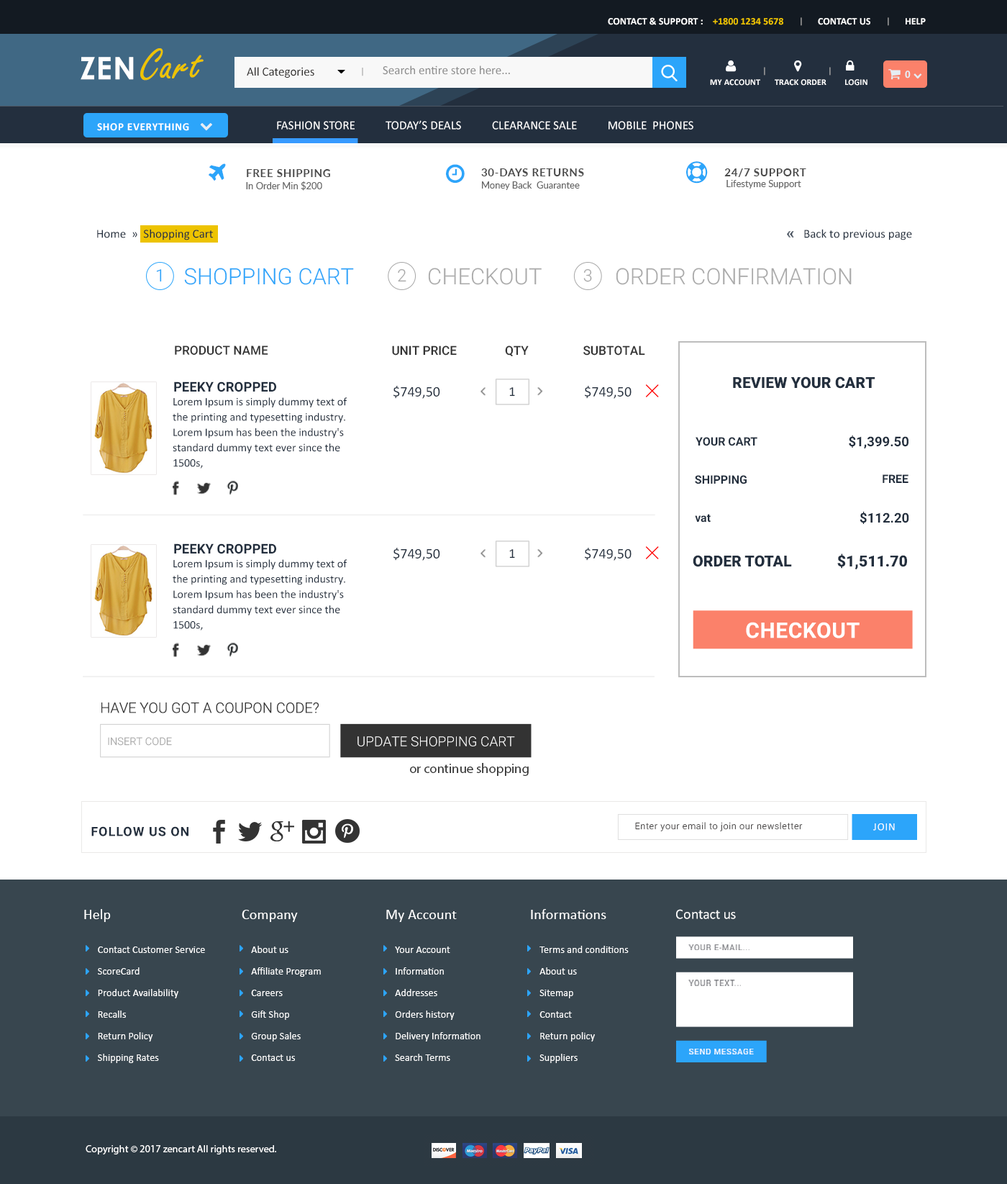
<style>
.page{position:relative;width:1007px;height:1184px;background:#ffffff}
.page>*{position:absolute;margin:0}
.t1{font:10.1px "Calibri-Bold";color:#ffffff;text-transform:uppercase}
.t2{font:10.1px "Calibri-Bold";color:#edc300;text-transform:uppercase}
.t3{font:8.6px "Calibri-Bold";text-transform:uppercase}
.t4{font:46.1px "FreestyleScript-Regular";color:#edc300;font-weight:bold}
.t5{font:31.1px "CenturyGothic-Bold";letter-spacing:0.02em;color:#ffffff;text-transform:uppercase}
.t6{font:12.2px "Calibri";color:#8e8e8e}
.t7{font:12.2px "Calibri";color:#32302f}
.t8{font:9.4px "Calibri"}
.t9{font:10.8px "Calibri-Bold";color:#e5edf4;text-transform:uppercase}
.t10{font:8.6px "Calibri-Bold";letter-spacing:0.01em;color:#ffffff;text-transform:uppercase}
.t11{font:10.8px "Calibri-Bold";letter-spacing:0.05em;color:#ffffff;text-transform:uppercase}
.t12{font:12.2px "Calibri";color:#ffffff}
.t13{font:10.8px "Lato-Bold";letter-spacing:0.05em;color:#4b4b4b}
.t14{font:9.4px "Lato-Regular";color:#666666}
.t15{font:12.2px "Calibri";color:#232f3e}
.t16{font:16.8px "Roboto-Light";color:#2ca5fa}
.t17{font:22.5px "Roboto-Light";color:#2ca5fa;text-transform:uppercase}
.t18{font:16.8px "Roboto-Light";color:#aaaaaa}
.t19{font:22.5px "Roboto-Light";color:#aaaaaa;text-transform:uppercase}
.t20{font:12.4px "Roboto-Medium";color:#333333}
.t21{font:15.3px "Roboto-Black";color:#232f3e}
.t22{font:13.4px "Roboto-Bold";color:#232f3e;text-transform:uppercase}
.t23{font:14.4px "Calibri";color:#232f3e}
.t24{font:13.4px "Calibri";color:#232f3e;text-transform:uppercase}
.t25{font:11.5px/15.3px "Calibri";color:#232f3e}
.t26{font:11.5px "Roboto-Bold";color:#232f3e}
.t27{font:13.4px "Roboto-Bold";color:#232f3e}
.t28{font:21.6px "Roboto-Bold";letter-spacing:0.02em;color:#ffffff;text-transform:uppercase}
.t29{font:14.4px "Roboto-Light";color:#333333}
.t30{font:10.5px "Roboto-Light";color:#a8a8a8;text-transform:uppercase}
.t31{font:13.7px "Roboto-Light";color:#ffffff;text-transform:uppercase}
.t32{font:13.4px "MyriadPro-Regular";color:#333333}
.t33{font:9.1px "Roboto-Light";letter-spacing:0.05em;color:#3f3d3d}
.t34{font:12.8px "Roboto-Bold";letter-spacing:0.05em;color:#232f3e}
.t35{font:10.8px "Calibri";letter-spacing:0.05em;color:#ffffff}
.t36{font:10.1px/21.6px "Calibri";letter-spacing:0.01em;color:#ffffff}
.t37{font:14.4px "Calibri";letter-spacing:0.01em;color:#ffffff}
.t38{font:14.4px "Calibri";color:#ffffff}
.t39{font:7.9px "Roboto-Regular";letter-spacing:0.07em;color:#7e7f84;text-transform:uppercase}
.t40{font:7.9px "Roboto-Regular";letter-spacing:0.07em;color:#ffffff;text-transform:uppercase}
.t41{font:10.1px "MyriadPro-Regular";letter-spacing:0.01em;color:#ffffff}
</style>
<div class="page">
<p class="t1" style="left:608px;top:17px;width:95px;height:8px">Contact &amp; Support :</p>
<p class="t1" style="left:713px;top:18px;width:213px;height:7px"><span class="t2">+1800 1234 5678 </span>              Contact Us               Help</p>
<p class="t3" style="left:801px;top:17px;width:1px;height:9px">|</p>
<p class="t3" style="left:888px;top:17px;width:1px;height:9px">|</p>
<p class="t4" style="left:140px;top:48px;width:64px;height:33px">Cart</p>
<p class="t5" style="left:81px;top:57px;width:53px;height:23px">Zen</p>
<p class="t6" style="left:383px;top:65px;width:127px;height:10px">Search entire store here...</p>
<p class="t7" style="left:247px;top:67px;width:67px;height:11px">All Categories</p>
<p class="t8" style="left:362px;top:68px;width:1px;height:8px">|</p>
<p class="t3" style="left:764px;top:67px;width:2px;height:9px">|</p>
<p class="t3" style="left:830px;top:67px;width:1px;height:9px">|</p>
<p class="t9" style="left:905px;top:71px;width:6px;height:7px">0</p>
<p class="t10" style="left:710px;top:79px;width:158px;height:7px">my account       Track Order         Login</p>
<p class="t11" style="left:97px;top:123px;width:92px;height:8px">Shop Everything</p>
<p class="t12" style="left:277px;top:120px;width:417px;height:10px">FASHION STORE           TODAY’S DEALS           CLEARANCE SALE           MOBILE  PHONES</p>
<p class="t13" style="left:247px;top:169px;width:83px;height:8px">FREE SHIPPING</p>
<p class="t13" style="left:481px;top:168px;width:103px;height:8px">30-DAYS RETURNS</p>
<p class="t13" style="left:725px;top:168px;width:82px;height:9px">24/7 SUPPORT</p>
<p class="t14" style="left:246px;top:181px;width:76px;height:10px">In Order Min $200</p>
<p class="t14" style="left:482px;top:181px;width:98px;height:9px">Money Back  Guarantee</p>
<p class="t14" style="left:727px;top:180px;width:75px;height:9px">Lifestyme Support</p>
<p class="t15" style="left:97px;top:229px;width:116px;height:11px">Home  »  Shopping Cart</p>
<p class="t15" style="left:804px;top:229px;width:108px;height:11px">Back to previous page</p>
<p class="t16" style="left:156px;top:269px;width:6px;height:13px">1</p>
<p class="t17" style="left:184px;top:268px;width:170px;height:17px">Shopping Cart</p>
<p class="t18" style="left:398px;top:268px;width:9px;height:14px">2</p>
<p class="t19" style="left:428px;top:268px;width:114px;height:17px">checkout</p>
<p class="t18" style="left:584px;top:268px;width:8px;height:14px">3</p>
<p class="t19" style="left:616px;top:268px;width:236px;height:17px">order confirmation</p>
<p class="t20" style="left:175px;top:345px;width:93px;height:10px">PRODUCT NAME</p>
<p class="t20" style="left:392px;top:345px;width:65px;height:10px">UNIT PRICE</p>
<p class="t20" style="left:505px;top:345px;width:24px;height:11px">QTY</p>
<p class="t20" style="left:584px;top:345px;width:61px;height:10px">SUBTOTAL</p>
<p class="t21" style="left:733px;top:376px;width:143px;height:13px">REVIEW YOUR CART</p>
<p class="t22" style="left:174px;top:381px;width:102px;height:11px">Peeky cropped</p>
<p class="t23" style="left:394px;top:386px;width:46px;height:13px">$749,50</p>
<p class="t24" style="left:509px;top:387px;width:6px;height:9px">1</p>
<p class="t23" style="left:585px;top:386px;width:47px;height:13px">$749,50</p>
<p class="t25" style="left:173px;top:397px;width:175px;height:71px">Lorem Ipsum is simply dummy text of the printing and typesetting industry. Lorem Ipsum has been the industry's standard dummy text ever since the 1500s,</p>
<p class="t26" style="left:696px;top:437px;width:62px;height:9px">YOUR CART</p>
<p class="t27" style="left:849px;top:435px;width:60px;height:14px">$1,399.50</p>
<p class="t26" style="left:695px;top:475px;width:52px;height:9px">SHIPPING</p>
<p class="t26" style="left:883px;top:474px;width:26px;height:9px">FREE</p>
<p class="t26" style="left:695px;top:514px;width:16px;height:8px">vat</p>
<p class="t27" style="left:860px;top:511px;width:50px;height:13px">$112.20</p>
<p class="t22" style="left:174px;top:543px;width:102px;height:11px">Peeky cropped</p>
<p class="t23" style="left:394px;top:548px;width:46px;height:13px">$749,50</p>
<p class="t24" style="left:509px;top:549px;width:6px;height:9px">1</p>
<p class="t23" style="left:585px;top:548px;width:47px;height:13px">$749,50</p>
<p class="t21" style="left:693px;top:555px;width:99px;height:12px">ORDER TOTAL</p>
<p class="t21" style="left:838px;top:553px;width:69px;height:16px">$1,511.70</p>
<p class="t25" style="left:173px;top:559px;width:175px;height:71px">Lorem Ipsum is simply dummy text of the printing and typesetting industry. Lorem Ipsum has been the industry's standard dummy text ever since the 1500s,</p>
<p class="t28" style="left:746px;top:622px;width:114px;height:16px">checkout</p>
<p class="t29" style="left:101px;top:702px;width:218px;height:11px">HAVE YOU GOT A COUPON CODE?</p>
<p class="t30" style="left:108px;top:737px;width:64px;height:8px">insert code</p>
<p class="t31" style="left:358px;top:736px;width:157px;height:10px">update shopping cart</p>
<p class="t32" style="left:410px;top:763px;width:119px;height:13px">or continue shopping</p>
<p class="t33" style="left:635px;top:822px;width:168px;height:9px">Enter your email to join our newsletter</p>
<p class="t34" style="left:91px;top:826px;width:98px;height:10px">FOLLOW US ON</p>
<p class="t35" style="left:874px;top:823px;width:21px;height:7px">JOIN</p>
<p class="t36" style="left:84px;top:909px;width:121px;height:154px"><span class="t37">Help<br><br></span>      Contact Customer Service<br>      ScoreCard<br>      Product Availability<br>      Recalls<br>      Return Policy<br>      Shipping Rates</p>
<p class="t36" style="left:242px;top:910px;width:79px;height:151px"><span class="t37">Company<br><br></span>    About us<br>    Affiliate Program<br>    Careers<br>    Gift Shop<br>    Group Sales<br>    Contact us</p>
<p class="t36" style="left:386px;top:910px;width:95px;height:151px"><span class="t37">My Account<br><br> </span>   Your Account<br>    Information<br>    Addresses<br>    Orders history<br>    Delivery Information<br>    Search Terms</p>
<p class="t36" style="left:531px;top:909px;width:98px;height:154px"><span class="t37">Informations<br><br></span>    Terms and conditions<br>    About us<br>    Sitemap<br>    Contact<br>    Return policy<br>    Suppliers</p>
<p class="t38" style="left:676px;top:909px;width:60px;height:10px">Contact us</p>
<p class="t39" style="left:689px;top:944px;width:61px;height:6px">your e-mail...</p>
<p class="t39" style="left:689px;top:979px;width:52px;height:7px">your text...</p>
<p class="t40" style="left:689px;top:1048px;width:65px;height:6px">Send MESSAGE</p>
<p class="t41" style="left:86px;top:1145px;width:190px;height:9px">Copyright © 2017 zencart All rights reserved.</p>
</div>
